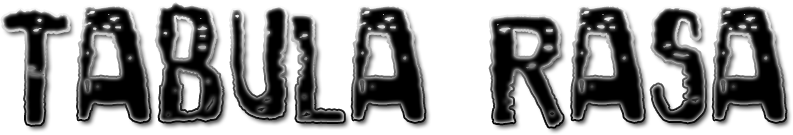
<style>
.page{position:relative;width:793px;height:135px;background:#ffffff}
.page>*{position:absolute;margin:0}
.t1{font:143.4px "SantaGravita"}
</style>
<div class="page">
<p class="t1" style="left:2px;top:2px;width:784px;height:125px">Tabula Rasa</p>
</div>
